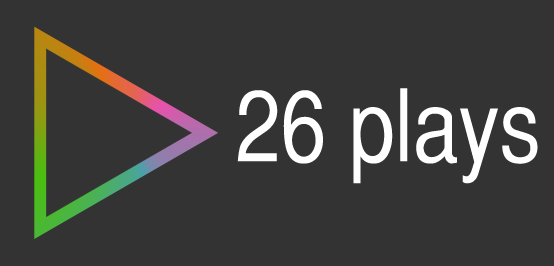
<style>
.page{position:relative;width:554px;height:266px;background:#333333}
.page>*{position:absolute;margin:0}
.t1{font:100px "HelveticaCYPlain";color:#ffffff}
</style>
<div class="page">
<p class="t1" style="left:237px;top:88px;width:301px;height:96px">26 plays</p>
</div>
